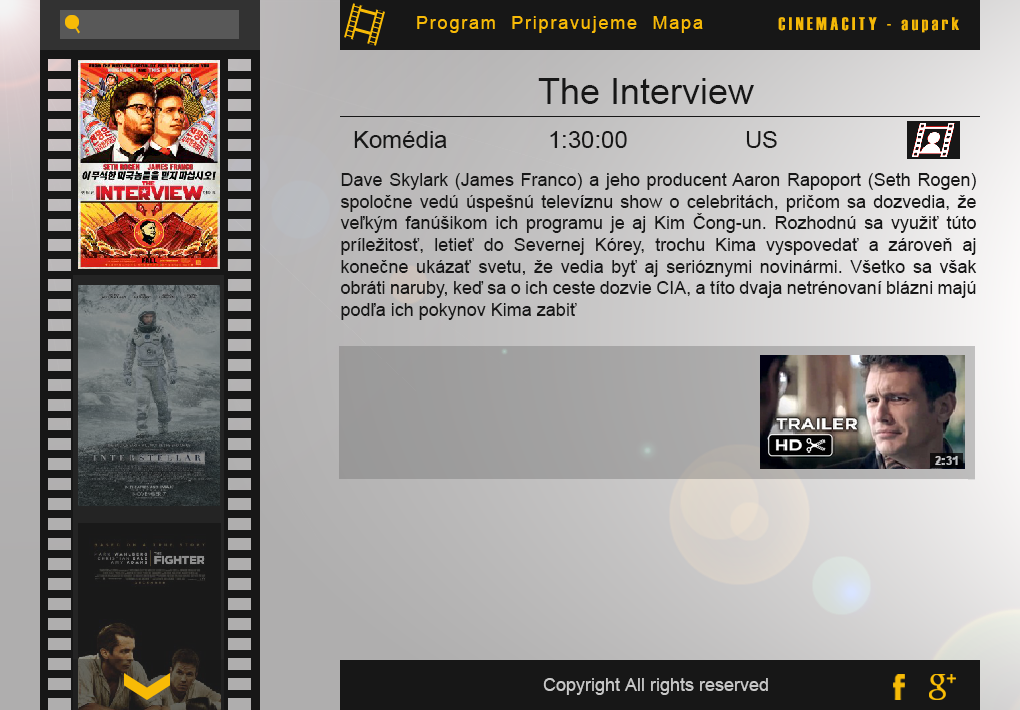
<style>
.page{position:relative;width:1020px;height:710px}
.page>*{position:absolute;margin:0}
.t1{font:18px "ArialMT";letter-spacing:0.1em;color:#f8bb06}
.t2{font:18px "Haettenschweiler";letter-spacing:0.2em;color:#f5b906}
.t3{font:36px "ArialMT";color:#171717}
.t4{font:24px "ArialMT";color:#171717}
.t5{font:18px "ArialMT";color:#171717}
.t6{font:18px "ArialMT";color:#c8c8c8}
</style>
<div class="page">
<p class="t1" style="left:417px;top:16px;width:286px;height:17px">Program  Pripravujeme  Mapa</p>
<p class="t2" style="left:778px;top:17px;width:181px;height:16px">CINEMACITY - aupark</p>
<p class="t3" style="left:538px;top:78px;width:216px;height:26px">The Interview</p>
<p class="t4" style="left:354px;top:131px;width:93px;height:17px">Komédia</p>
<p class="t4" style="left:550px;top:131px;width:77px;height:17px">1:30:00</p>
<p class="t4" style="left:746px;top:131px;width:31px;height:17px">US</p>
<p class="t5" style="left:340px;top:173px;width:637px;height:147px;text-align:justify">Dave Skylark (James Franco) a jeho producent Aaron Rapoport (Seth Rogen) spoločne vedú úspešnú televíznu show o celebritách, pričom sa dozvedia, že veľkým fanúšikom ich programu je aj Kim Čong-un. Rozhodnú sa využiť túto príležitosť, letieť do Severnej Kórey, trochu Kima vyspovedať a zároveň aj konečne ukázať svetu, že vedia byť aj serióznymi novinármi. Všetko sa však obráti naruby, keď sa o ich ceste dozvie CIA, a títo dvaja netrénovaní blázni majú podľa ich pokynov Kima zabiť</p>
<p class="t6" style="left:543px;top:678px;width:225px;height:17px">Copyright All rights reserved</p>
</div>
